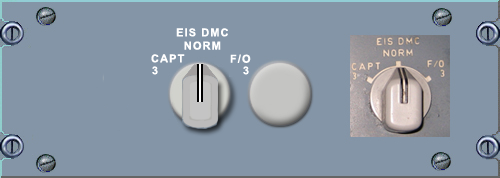
<style>
.page{position:relative;width:500px;height:178px;background:#8495a7}
.page>*{position:absolute;margin:0}
.t1{font:11px "Arial-BoldMT";letter-spacing:0.1em;color:#ffffff}
.t2{font:11px "Arial-BoldMT";color:#ffffff}
</style>
<div class="page">
<p class="t1" style="left:176px;top:28px;width:52px;height:22px;text-align:center">EIS DMC<br>NORM</p>
<p class="t1" style="left:151px;top:54px;width:34px;height:9px">CAPT</p>
<p class="t1" style="left:230px;top:54px;width:21px;height:9px">F/O</p>
<p class="t2" style="left:152px;top:66px;width:6px;height:9px">3</p>
<p class="t2" style="left:243px;top:66px;width:6px;height:9px">3</p>
</div>
